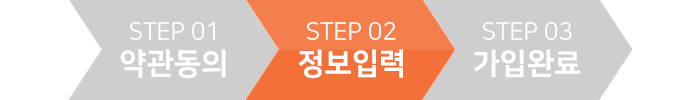
<style>
.page{position:relative;width:700px;height:100px;background:#cecece}
.page>*{position:absolute;margin:0}
.t1{font:24px "NanumSquareR";color:#ffffff}
.t2{font:30px "NanumSquareEB";color:#ffffff}
</style>
<div class="page">
<p class="t1" style="left:130px;top:21px;width:85px;height:19px">STEP 01</p>
<p class="t1" style="left:307px;top:21px;width:89px;height:19px">STEP 02</p>
<p class="t1" style="left:483px;top:21px;width:89px;height:20px">STEP 03</p>
<p class="t2" style="left:120px;top:49px;width:106px;height:30px">약관동의</p>
<p class="t2" style="left:298px;top:49px;width:105px;height:30px">정보입력</p>
<p class="t2" style="left:474px;top:49px;width:107px;height:29px">가입완료</p>
</div>
